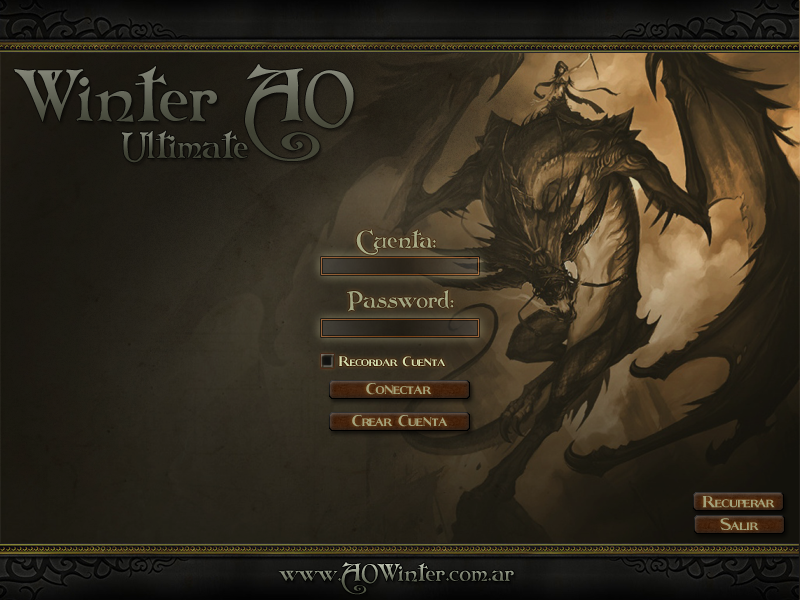
<style>
.page{position:relative;width:800px;height:600px}
.page>*{position:absolute;margin:0}
.t1{font:72px "Folkard"}
.t2{font:36px "Folkard";color:#4c4f41}
.t3{font:24px "Folkard";color:#a7ab86}
.t4{font:24px "Folkard";color:#a3a783}
.t5{font:26px "Fleet-Street";color:#cbd9ac}
.t6{font:30px "Fleet-Street";color:#a2a27d}
.t7{font:30px "Fleet-Street";color:#a2a37d}
.t8{font:30px "Fleet-Street";color:#a2a27c}
.t9{font:24px "Folkard"}
</style>
<div class="page">
<p class="t1" style="left:14px;top:64px;width:340px;height:97px">Winter AO</p>
<p class="t2" style="left:121px;top:130px;width:127px;height:33px">Ultimate</p>
<p class="t3" style="left:356px;top:229px;width:80px;height:26px">Cuenta:</p>
<p class="t4" style="left:347px;top:289px;width:107px;height:23px">Password:</p>
<p class="t5" style="left:339px;top:356px;width:106px;height:11px">Recordar Cuenta</p>
<p class="t6" style="left:366px;top:382px;width:66px;height:13px">Conectar</p>
<p class="t7" style="left:352px;top:414px;width:95px;height:13px">Crear Cuenta</p>
<p class="t8" style="left:702px;top:496px;width:73px;height:12px">Recuperar</p>
<p class="t8" style="left:720px;top:518px;width:39px;height:13px">Salir</p>
<p class="t9" style="left:278px;top:562px;width:236px;height:33px">www.AOWinter.com.ar</p>
</div>
